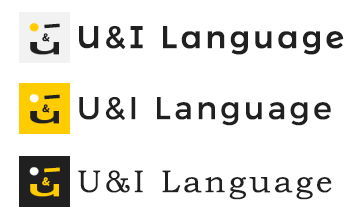
<style>
.page{position:relative;width:360px;height:223px;background:#ffffff}
.page>*{position:absolute;margin:0}
.t1{font:20.5px "NotoSansJP-Bold";letter-spacing:0.08em;color:#202020;font-weight:bold}
.t2{font:31.5px "MontserratAlternates-Medium";letter-spacing:0.08em;color:#202020;font-weight:bold}
.t3{font:10.1px "NotoSansJP-Bold";letter-spacing:0.08em;color:#202020;font-weight:bold}
.t4{font:31.5px "Montserrat-Regular";letter-spacing:0.08em;color:#202020;font-weight:bold}
.t5{font:20.5px "NotoSansJP-Bold";letter-spacing:0.08em;color:#ffcc00;font-weight:bold}
.t6{font:31.5px "BookmanOldStyle";letter-spacing:0.08em;color:#202020;font-weight:bold}
.t7{font:10.1px "NotoSansJP-Bold";letter-spacing:0.08em;color:#ffcc00;font-weight:bold}
</style>
<div class="page">
<p class="t1" style="left:44px;top:23px;width:16px;height:6px;rotate:-94deg">I</p>
<p class="t2" style="left:79px;top:26px;width:265px;height:29px">U&amp;I Language</p>
<p class="t3" style="left:42px;top:33px;width:8px;height:9px;rotate:7deg">&amp;</p>
<p class="t1" style="left:44px;top:94px;width:16px;height:6px;rotate:-94deg">I</p>
<p class="t4" style="left:79px;top:97px;width:252px;height:29px">U&amp;I Language</p>
<p class="t3" style="left:42px;top:104px;width:8px;height:9px;rotate:7deg">&amp;</p>
<p class="t5" style="left:44px;top:167px;width:16px;height:6px;rotate:-94deg">I</p>
<p class="t6" style="left:78px;top:170px;width:254px;height:30px">U&amp;I Language</p>
<p class="t7" style="left:42px;top:177px;width:8px;height:9px;rotate:7deg">&amp;</p>
</div>
